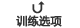
<style>
.page{position:relative;width:80px;height:28px;background:#ffffff}
.page>*{position:absolute;margin:0}
.t1{font:11px "MicrosoftYaHei";letter-spacing:0.01em;color:#333333;font-weight:bold}
</style>
<div class="page">
<p class="t1" style="left:16px;top:15px;width:46px;height:12px">训练选项</p>
</div>
